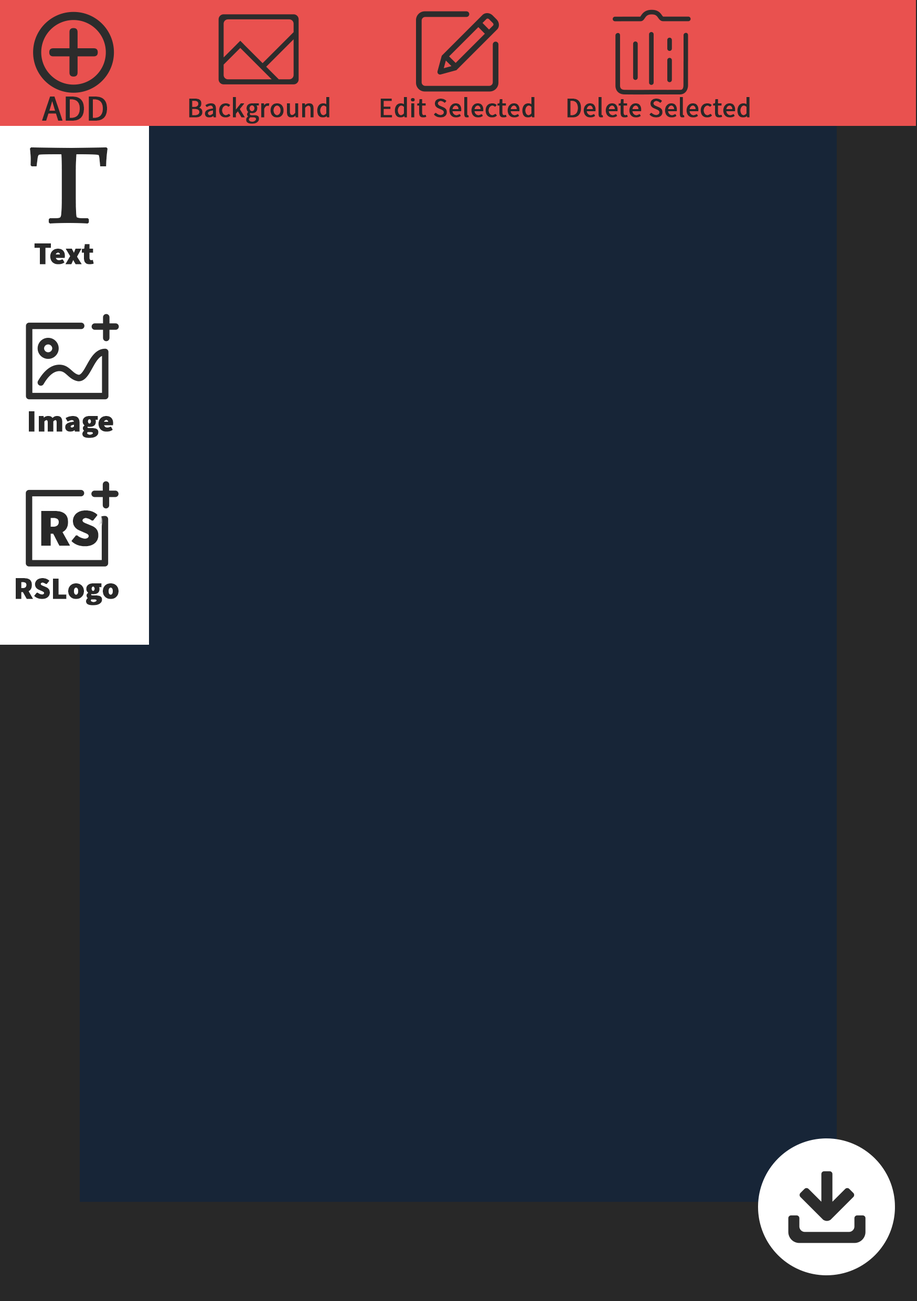
<style>
.page{position:relative;width:917px;height:1301px;background:#172537}
.page>*{position:absolute;margin:0}
.t1{font:35.8px "SourceSansPro-Regular";color:#282828;font-weight:bold}
.t2{font:27.2px "SourceSansPro-Regular";color:#282828;font-weight:bold}
.t3{font:106.7px "BookAntiqua";color:#282828;font-weight:bold;scale:1.22 1}
.t4{font:30.6px "SourceSansPro-Bold";color:#282828;font-weight:bold}
.t5{font:51.7px "SourceSansPro-Bold";color:#282828;font-weight:bold}
</style>
<div class="page">
<p class="t1" style="left:42px;top:97px;width:65px;height:24px">ADD</p>
<p class="t2" style="left:189px;top:97px;width:140px;height:27px">Background</p>
<p class="t2" style="left:380px;top:97px;width:154px;height:20px">Edit Selected</p>
<p class="t2" style="left:567px;top:97px;width:182px;height:20px">Delete Selected</p>
<p class="t3" style="left:30px;top:147px;width:78px;height:77px">T</p>
<p class="t4" style="left:34px;top:243px;width:60px;height:21px">Text</p>
<p class="t4" style="left:29px;top:411px;width:84px;height:27px">Image</p>
<p class="t5" style="left:41px;top:510px;width:58px;height:36px">RS</p>
<p class="t4" style="left:16px;top:578px;width:103px;height:27px">RSLogo</p>
</div>
